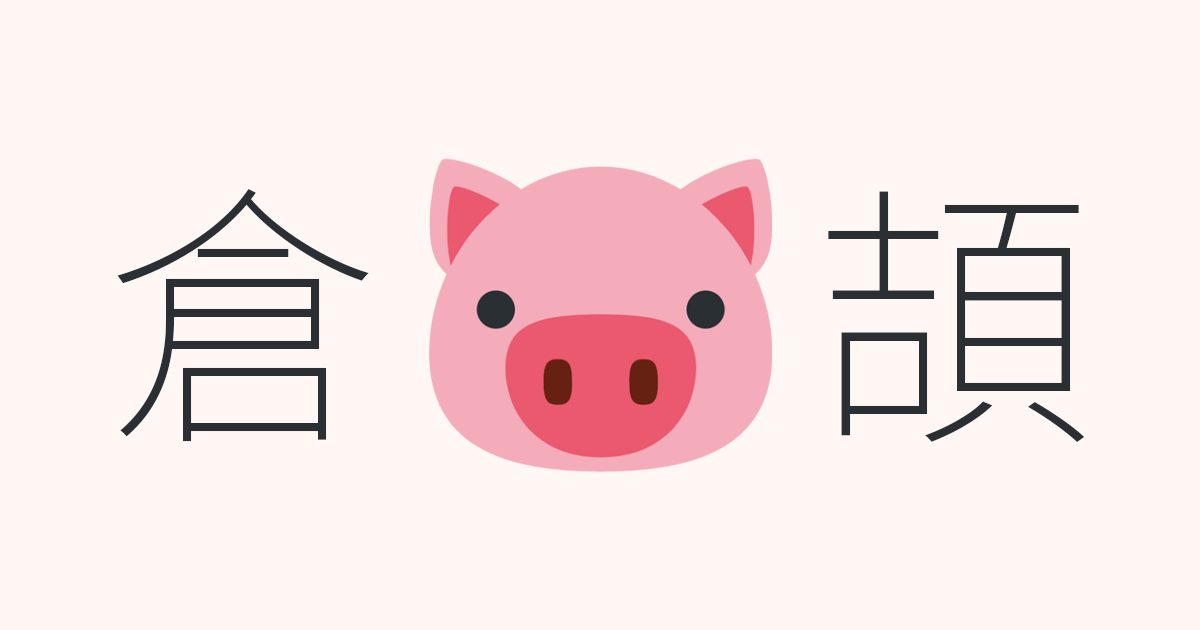
<style>
.page{position:relative;width:1200px;height:630px;background:#fff7f4}
.page>*{position:absolute;margin:0}
.t1{font:280px "NotoSansTC-Thin";color:#292f33}
</style>
<div class="page">
<p class="t1" style="left:117px;top:189px;width:968px;height:253px">倉       頡</p>
</div>
